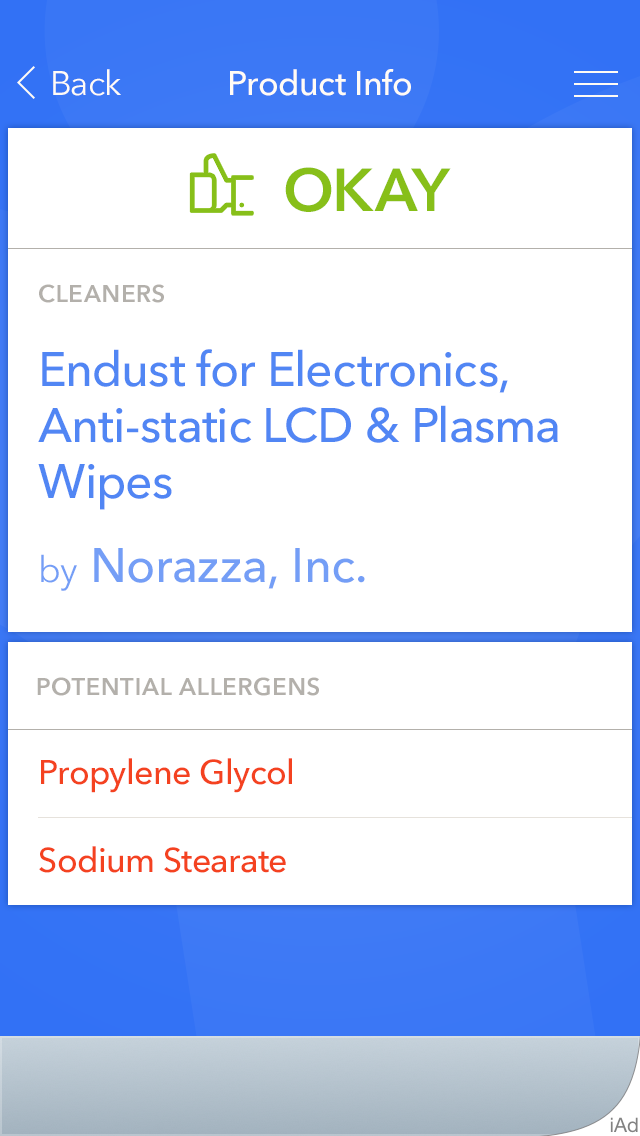
<style>
.page{position:relative;width:640px;height:1136px;background:#ffffff}
.page>*{position:absolute;margin:0}
.t1{font:34px "AvenirNext-Regular";letter-spacing:-0.01em;color:#fffbf5}
.t2{font:34px "AvenirNext-Medium";letter-spacing:-0.01em;color:#fffbf5}
.t3{font:60px "AvenirNext-DemiBold";letter-spacing:-0.01em;color:#87bf19;text-transform:uppercase}
.t4{font:24px "AvenirNext-DemiBold";letter-spacing:0.025em;color:#b3b0ab;text-transform:uppercase}
.t5{font:48px/56px "AvenirNext-Medium";letter-spacing:-0.01em;color:#5186f4}
.t6{font:48px "AvenirNext-Medium";color:#749ef6}
.t7{font:36px "AvenirNext-Regular";color:#749ef6}
.t8{font:34px/88px "AvenirNext-Medium";letter-spacing:-0.01em;color:#f44220}
</style>
<div class="page">
<p class="t1" style="left:53px;top:69px;width:68px;height:27px">Back</p>
<p class="t2" style="left:230px;top:69px;width:181px;height:27px">Product Info</p>
<p class="t3" style="left:285px;top:167px;width:166px;height:45px">Okay</p>
<p class="t4" style="left:39px;top:284px;width:125px;height:19px">Cleaners</p>
<p class="t5" style="left:38px;top:349px;width:520px;height:161px">Endust for Electronics, Anti-static LCD &amp; Plasma Wipes</p>
<p class="t6" style="left:41px;top:548px;width:324px;height:43px"><span class="t7">by </span>Norazza, Inc.</p>
<p class="t4" style="left:37px;top:677px;width:282px;height:19px">Potential Allergens</p>
<p class="t8" style="left:39px;top:758px;width:253px;height:115px">Propylene Glycol<br>Sodium Stearate</p>
</div>
